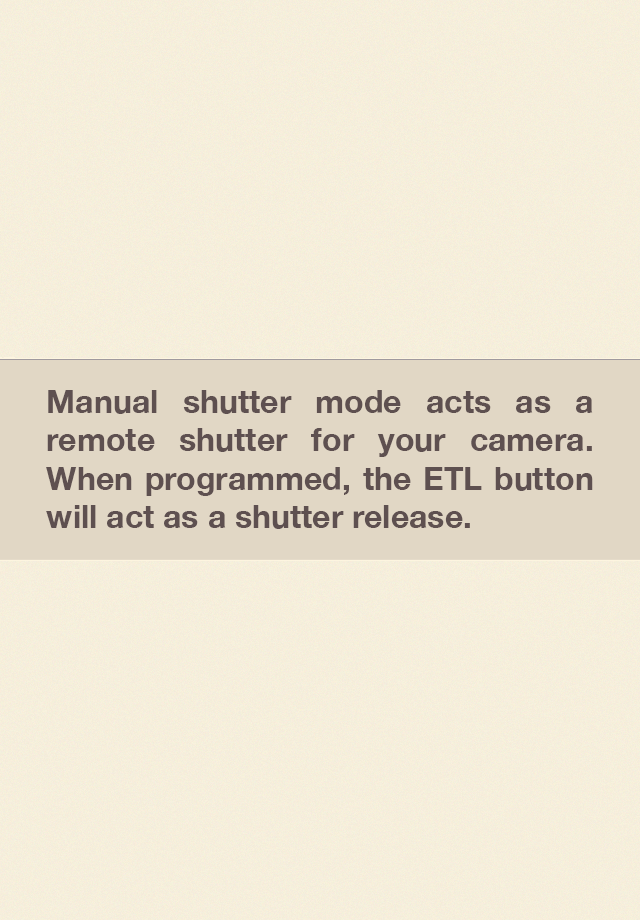
<style>
.page{position:relative;width:640px;height:920px}
.page>*{position:absolute;margin:0}
.t1{font:32px "HelveticaNeue-Bold";color:#5e5050}
</style>
<div class="page">
<p class="t1" style="left:46px;top:390px;width:547px;height:139px;text-align:justify">Manual shutter mode acts as a remote shutter for your camera. When programmed, the ETL button will act as a shutter release.</p>
</div>
